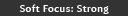
<style>
.page{position:relative;width:128px;height:16px;background:#333333}
.page>*{position:absolute;margin:0}
.t1{font:10px "AmiraParadiso";letter-spacing:0.05em;color:#ffffff}
</style>
<div class="page">
<p class="t1" style="left:19px;top:4px;width:90px;height:10px">Soft Focus: Strong</p>
</div>
